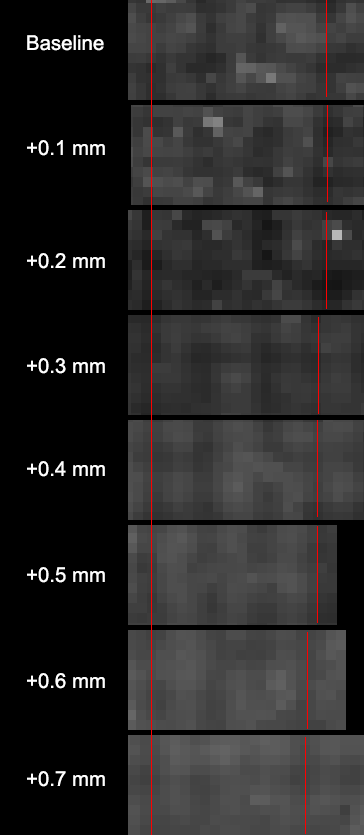
<style>
.page{position:relative;width:364px;height:835px;background:#000000}
.page>*{position:absolute;margin:0}
.t1{font:20.4px "ArialMT";color:#ffffff}
</style>
<div class="page">
<p class="t1" style="left:27px;top:35px;width:77px;height:16px">Baseline</p>
<p class="t1" style="left:27px;top:140px;width:78px;height:16px">+0.1 mm</p>
<p class="t1" style="left:27px;top:253px;width:78px;height:16px">+0.2 mm</p>
<p class="t1" style="left:27px;top:358px;width:78px;height:16px">+0.3 mm</p>
<p class="t1" style="left:27px;top:461px;width:78px;height:16px">+0.4 mm</p>
<p class="t1" style="left:27px;top:567px;width:78px;height:16px">+0.5 mm</p>
<p class="t1" style="left:27px;top:673px;width:78px;height:16px">+0.6 mm</p>
<p class="t1" style="left:27px;top:771px;width:78px;height:16px">+0.7 mm</p>
</div>
